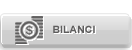
<style>
.page{position:relative;width:132px;height:50px;background:#ffffff}
.page>*{position:absolute;margin:0}
.t1{font:9.9px "Arial-BoldMT";color:#5e5d5d;text-transform:uppercase;scale:1.07 1}
</style>
<div class="page">
<p class="t1" style="left:53px;top:25px;width:42px;height:8px">Bilanci</p>
</div>
